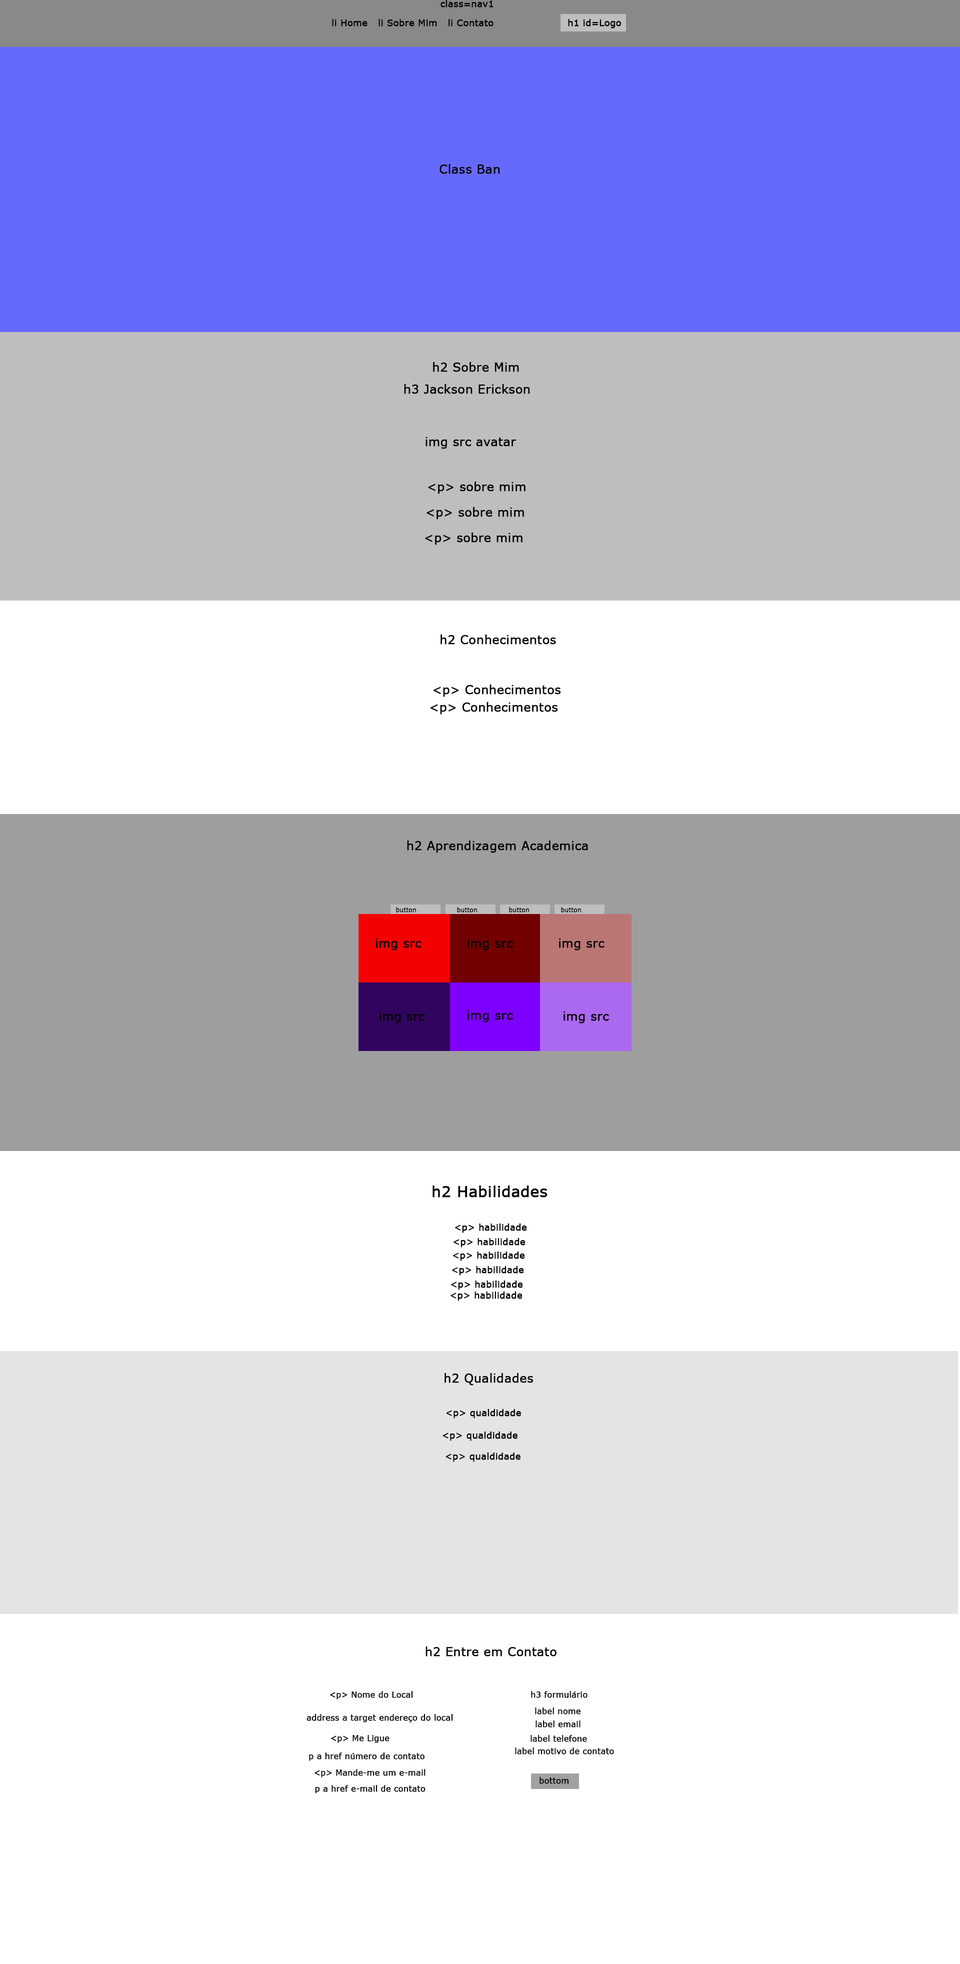
<style>
.page{position:relative;width:960px;height:1964px;background:#ffffff}
.page>*{position:absolute;margin:0}
.t1{font:9px "Verdana";color:#000000;font-weight:bold}
.t2{font:12px "Verdana";color:#000000;font-weight:bold}
.t3{font:6px "Verdana";color:#000000;font-weight:bold}
.t4{font:15px "Verdana";color:#000000;font-weight:bold}
.t5{font:8px "Verdana";color:#000000;font-weight:bold}
</style>
<div class="page">
<p class="t1" style="left:440px;top:0px;width:54px;height:8px">class=nav1</p>
<p class="t1" style="left:332px;top:19px;width:36px;height:7px">li Home</p>
<p class="t1" style="left:378px;top:19px;width:59px;height:7px">li Sobre Mim</p>
<p class="t1" style="left:448px;top:19px;width:46px;height:7px">li Contato</p>
<p class="t1" style="left:568px;top:19px;width:54px;height:9px">h1 id=Logo</p>
<p class="t2" style="left:440px;top:164px;width:60px;height:10px">Class Ban</p>
<p class="t2" style="left:433px;top:362px;width:86px;height:10px">h2 Sobre Mim</p>
<p class="t2" style="left:404px;top:384px;width:126px;height:10px">h3 Jackson Erickson</p>
<p class="t2" style="left:426px;top:437px;width:90px;height:12px">img src avatar</p>
<p class="t2" style="left:428px;top:482px;width:98px;height:12px">&lt;p&gt; sobre mim</p>
<p class="t2" style="left:426px;top:507px;width:98px;height:13px">&lt;p&gt; sobre mim</p>
<p class="t2" style="left:425px;top:532px;width:97px;height:13px">&lt;p&gt; sobre mim</p>
<p class="t2" style="left:440px;top:634px;width:116px;height:10px">h2 Conhecimentos</p>
<p class="t2" style="left:434px;top:684px;width:127px;height:13px">&lt;p&gt; Conhecimentos</p>
<p class="t2" style="left:430px;top:702px;width:128px;height:12px">&lt;p&gt; Conhecimentos</p>
<p class="t2" style="left:407px;top:840px;width:181px;height:13px">h2 Aprendizagem Academica</p>
<p class="t3" style="left:396px;top:907px;width:20px;height:5px">button</p>
<p class="t3" style="left:457px;top:907px;width:20px;height:5px">button</p>
<p class="t3" style="left:509px;top:907px;width:20px;height:5px">button</p>
<p class="t3" style="left:561px;top:907px;width:20px;height:5px">button</p>
<p class="t2" style="left:376px;top:938px;width:46px;height:12px">img src</p>
<p class="t2" style="left:468px;top:938px;width:45px;height:12px">img src</p>
<p class="t2" style="left:559px;top:938px;width:45px;height:12px">img src</p>
<p class="t2" style="left:380px;top:1012px;width:45px;height:12px">img src</p>
<p class="t2" style="left:468px;top:1010px;width:45px;height:12px">img src</p>
<p class="t2" style="left:564px;top:1012px;width:45px;height:12px">img src</p>
<p class="t4" style="left:432px;top:1186px;width:116px;height:12px">h2 Habilidades</p>
<p class="t1" style="left:455px;top:1224px;width:72px;height:9px">&lt;p&gt; habilidade</p>
<p class="t1" style="left:454px;top:1238px;width:72px;height:10px">&lt;p&gt; habilidade</p>
<p class="t1" style="left:453px;top:1252px;width:72px;height:9px">&lt;p&gt; habilidade</p>
<p class="t1" style="left:452px;top:1266px;width:72px;height:10px">&lt;p&gt; habilidade</p>
<p class="t1" style="left:451px;top:1280px;width:72px;height:10px">&lt;p&gt; habilidade</p>
<p class="t1" style="left:450px;top:1292px;width:72px;height:9px">&lt;p&gt; habilidade</p>
<p class="t2" style="left:444px;top:1373px;width:90px;height:13px">h2 Qualidades</p>
<p class="t1" style="left:446px;top:1409px;width:75px;height:9px">&lt;p&gt; qualdidade</p>
<p class="t1" style="left:442px;top:1432px;width:76px;height:9px">&lt;p&gt; qualdidade</p>
<p class="t1" style="left:446px;top:1452px;width:74px;height:10px">&lt;p&gt; qualdidade</p>
<p class="t2" style="left:426px;top:1646px;width:130px;height:10px">h2 Entre em Contato</p>
<p class="t5" style="left:330px;top:1691px;width:83px;height:9px">&lt;p&gt; Nome do Local</p>
<p class="t5" style="left:531px;top:1691px;width:57px;height:7px">h3 formulário</p>
<p class="t5" style="left:535px;top:1708px;width:46px;height:6px">label nome</p>
<p class="t5" style="left:306px;top:1714px;width:147px;height:8px">address a target endereço do local</p>
<p class="t5" style="left:536px;top:1720px;width:44px;height:8px">label email</p>
<p class="t5" style="left:331px;top:1735px;width:59px;height:8px">&lt;p&gt; Me Ligue</p>
<p class="t5" style="left:530px;top:1735px;width:57px;height:7px">label telefone</p>
<p class="t5" style="left:309px;top:1752px;width:115px;height:9px">p a href número de contato</p>
<p class="t5" style="left:515px;top:1748px;width:99px;height:6px">label motivo de contato</p>
<p class="t5" style="left:314px;top:1769px;width:112px;height:9px">&lt;p&gt; Mande-me um e-mail</p>
<p class="t5" style="left:540px;top:1777px;width:29px;height:7px">bottom</p>
<p class="t5" style="left:315px;top:1785px;width:111px;height:9px">p a href e-mail de contato</p>
</div>
